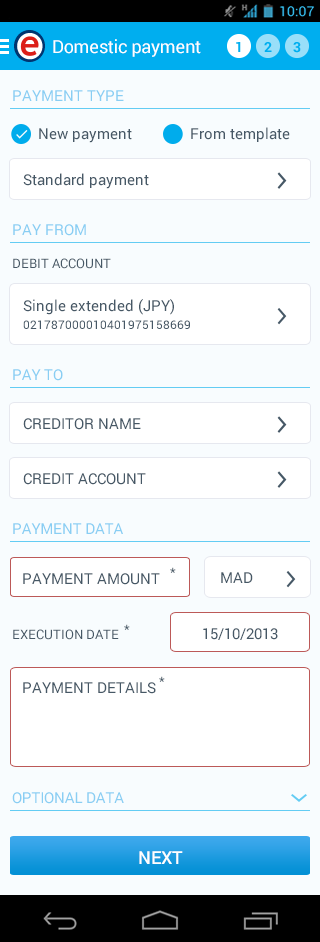
<style>
.page{position:relative;width:320px;height:942px;background:#f8fcfe}
.page>*{position:absolute;margin:0}
.t1{font:18px "Roboto-Regular";letter-spacing:-0.015em;color:#ffffff}
.t2{font:15px "Roboto-Regular";color:#89cef3}
.t3{font:15px "Roboto-Regular";color:#465866}
.t4{font:13px "Roboto-Regular";color:#465866}
.t5{font:12px/18px "Roboto-Regular";color:#465866}
.t6{font:15px/18px "Roboto-Regular";color:#465866}
.t7{font:15px "Roboto-Regular";letter-spacing:-0.015em;color:#89cef3}
.t8{font:13px "Roboto-Regular";letter-spacing:-0.02em;color:#465866}
.t9{font:18px "Roboto-Medium";color:#ffffff}
</style>
<div class="page">
<p class="t1" style="left:53px;top:39px;width:148px;height:18px">Domestic payment</p>
<p class="t2" style="left:13px;top:90px;width:111px;height:11px">PAYMENT TYPE</p>
<p class="t3" style="left:39px;top:128px;width:93px;height:15px">New payment</p>
<p class="t3" style="left:191px;top:127px;width:99px;height:15px">From template</p>
<p class="t3" style="left:23px;top:173px;width:126px;height:16px">Standard payment</p>
<p class="t2" style="left:13px;top:224px;width:73px;height:12px">PAY FROM</p>
<p class="t4" style="left:13px;top:258px;width:98px;height:11px">DEBIT ACCOUNT</p>
<p class="t5" style="left:23px;top:299px;width:167px;height:30px"><span class="t6">Single extended (JPY)<br></span>021787000010401975158669</p>
<p class="t7" style="left:13px;top:369px;width:50px;height:12px">PAY TO</p>
<p class="t3" style="left:23px;top:418px;width:118px;height:12px">CREDITOR NAME</p>
<p class="t3" style="left:23px;top:473px;width:123px;height:12px">CREDIT ACCOUNT</p>
<p class="t7" style="left:13px;top:523px;width:110px;height:11px">PAYMENT DATA</p>
<p class="t8" style="left:170px;top:567px;width:6px;height:6px">*</p>
<p class="t3" style="left:23px;top:573px;width:137px;height:12px">PAYMENT AMOUNT</p>
<p class="t3" style="left:221px;top:572px;width:32px;height:11px">MAD</p>
<p class="t4" style="left:13px;top:629px;width:106px;height:11px">EXECUTION DATE</p>
<p class="t8" style="left:124px;top:624px;width:6px;height:6px">*</p>
<p class="t3" style="left:203px;top:628px;width:75px;height:12px">15/10/2013</p>
<p class="t8" style="left:159px;top:676px;width:6px;height:6px">*</p>
<p class="t3" style="left:23px;top:682px;width:133px;height:12px">PAYMENT DETAILS</p>
<p class="t7" style="left:12px;top:792px;width:112px;height:12px">OPTIONAL DATA</p>
<p class="t9" style="left:139px;top:851px;width:44px;height:13px">NEXT</p>
</div>
